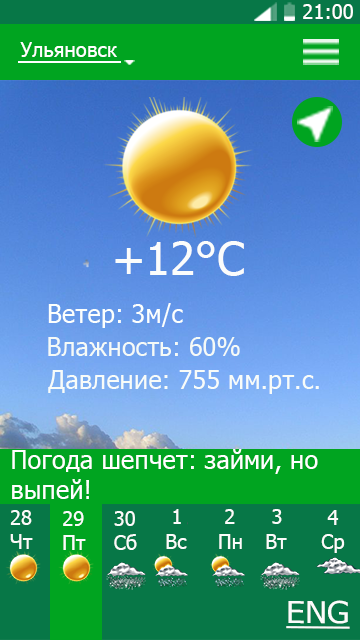
<style>
.page{position:relative;width:360px;height:640px}
.page>*{position:absolute;margin:0}
.t1{font:20.3px "Tahoma";color:#ffffff}
.t2{font:45.7px "Tahoma";color:#fbfcfb}
.t3{font:25.4px "Tahoma";color:#fcfffd}
.t4{font:25.4px "Tahoma";color:#f5faf7}
.t5{font:25.4px "Tahoma";color:#f8fcf9}
.t6{font:25.4px "Tahoma";color:#ffffff}
.t7{font:20.3px "Tahoma";color:#fbfcfb}
.t8{font:30.3px "Tahoma";color:#fbfcfb;text-decoration:underline;scale:1.1 1}
</style>
<div class="page">
<p class="t1" style="left:303px;top:4px;width:50px;height:15px">21:00</p>
<p class="t1" style="left:20px;top:42px;width:97px;height:15px">Ульяновск</p>
<p class="t2" style="left:115px;top:241px;width:129px;height:35px">+12°C</p>
<p class="t3" style="left:48px;top:303px;width:135px;height:25px">Ветер: 3м/с</p>
<p class="t4" style="left:48px;top:337px;width:192px;height:19px">Влажность: 60%</p>
<p class="t5" style="left:48px;top:370px;width:271px;height:24px">Давление: 755 мм.рт.с.</p>
<p class="t6" style="left:12px;top:449px;width:306px;height:50px;text-align:right">Погода шепчет: займи, но<br>выпей!</p>
<p class="t7" style="left:10px;top:510px;width:23px;height:39px;text-align:right">28<br>Чт</p>
<p class="t7" style="left:166px;top:509px;width:21px;height:40px;text-align:right">1<br>Вс</p>
<p class="t7" style="left:219px;top:509px;width:23px;height:40px;text-align:right">2<br>Пн</p>
<p class="t7" style="left:266px;top:509px;width:21px;height:40px;text-align:right">3<br>Вт</p>
<p class="t7" style="left:321px;top:510px;width:24px;height:43px;text-align:right">4<br>Ср</p>
<p class="t7" style="left:63px;top:511px;width:23px;height:39px;text-align:right">29<br>Пт</p>
<p class="t7" style="left:114px;top:511px;width:23px;height:39px;text-align:right">30<br>Сб</p>
<p class="t8" style="left:286px;top:600px;width:64px;height:29px">ENG</p>
</div>
